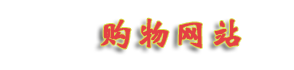
<style>
.page{position:relative;width:294px;height:70px;background:#ffffff}
.page>*{position:absolute;margin:0}
.t1{font:36px "STXinwei";color:#e54044;font-weight:bold}
</style>
<div class="page">
<p class="t1" style="left:101px;top:18px;width:140px;height:31px">购物网站</p>
</div>
